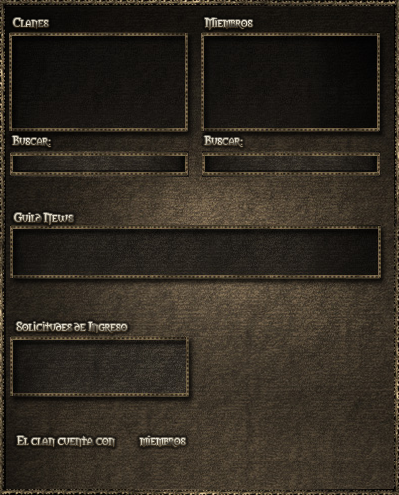
<style>
.page{position:relative;width:399px;height:495px}
.page>*{position:absolute;margin:0}
.t1{font:12px "Morpheus"}
</style>
<div class="page">
<p class="t1" style="left:13px;top:18px;width:36px;height:11px">Clanes</p>
<p class="t1" style="left:205px;top:18px;width:48px;height:12px">Miembros</p>
<p class="t1" style="left:12px;top:136px;width:39px;height:11px">Buscar:</p>
<p class="t1" style="left:204px;top:136px;width:39px;height:11px">Buscar:</p>
<p class="t1" style="left:14px;top:213px;width:60px;height:12px">Guild News</p>
<p class="t1" style="left:16px;top:322px;width:112px;height:11px">Solicitudes de Ingreso</p>
<p class="t1" style="left:17px;top:436px;width:169px;height:11px">El clan cuenta con         miembros</p>
</div>
